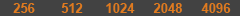
<style>
.page{position:relative;width:240px;height:16px;background:#424242}
.page>*{position:absolute;margin:0}
.t1{font:13px "Arial-BoldMT";color:#df7a1f}
</style>
<div class="page">
<p class="t1" style="left:13px;top:3px;width:22px;height:10px">256</p>
<p class="t1" style="left:61px;top:3px;width:22px;height:10px">512</p>
<p class="t1" style="left:106px;top:3px;width:29px;height:10px">1024</p>
<p class="t1" style="left:153px;top:3px;width:29px;height:10px">2048</p>
<p class="t1" style="left:201px;top:3px;width:30px;height:10px">4096</p>
</div>
